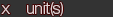
<style>
.page{position:relative;width:113px;height:17px;background:#333333}
.page>*{position:absolute;margin:0}
.t1{font:14px "GothicMB101Pro-Light";letter-spacing:-0.04em;color:#ddd3d3}
</style>
<div class="page">
<p class="t1" style="left:1px;top:2px;width:62px;height:14px">x    unit(s)</p>
</div>
